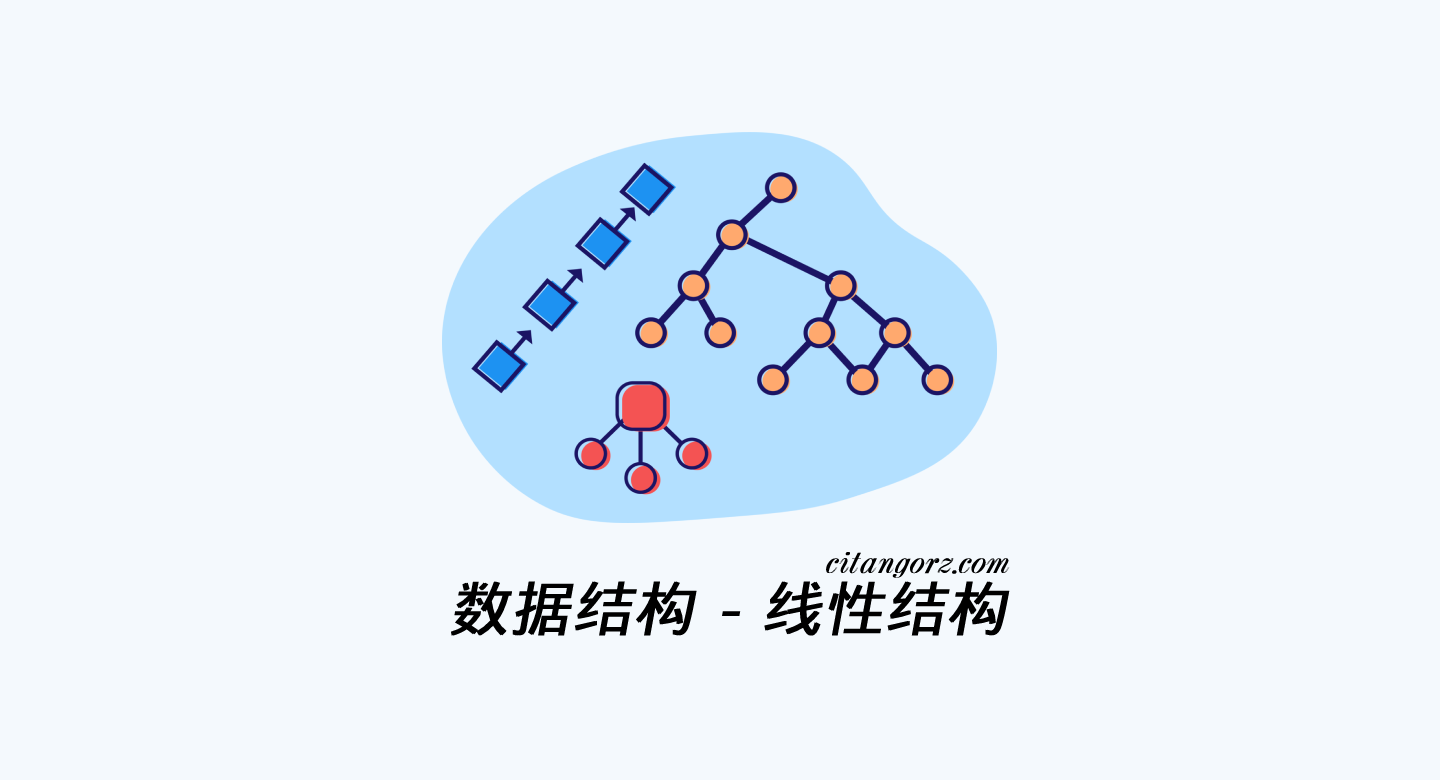
<style>
.page{position:relative;width:1440px;height:780px;background:#f4f9fd}
.page>*{position:absolute;margin:0}
.t1{font:35px "Dubiel-Italic";color:#000000;font-weight:bold;font-style:italic}
.t2{font:60px "DroidSansFallback";color:#000000;font-weight:bold;font-style:italic}
.t3{font:60px "DejaVuSans";color:#000000;font-weight:bold;font-style:italic}
</style>
<div class="page">
<p class="t1" style="left:826px;top:551px;width:184px;height:27px">citangorz.com</p>
<p class="t2" style="left:450px;top:581px;width:560px;height:55px">数据结构 <span class="t3">- </span>线性结构</p>
</div>
